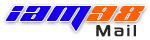
<style>
.page{position:relative;width:150px;height:40px;background:#ffffff}
.page>*{position:absolute;margin:0}
.t1{font:27.9px "PlanetKosmos";letter-spacing:0.075em;color:#1600ee;scale:1.08 1}
.t2{font:27.9px "PlanetKosmos";letter-spacing:0.075em;color:#ff5f07;scale:1.08 1}
.t3{font:22.7px "SonySketchEF";letter-spacing:0.1em;color:#272728;font-weight:bold;scale:0.88 1}
</style>
<div class="page">
<p class="t1" style="left:5px;top:6px;width:86px;height:25px">iam</p>
<p class="t2" style="left:86px;top:6px;width:59px;height:15px">98</p>
<p class="t3" style="left:96px;top:25px;width:40px;height:12px">Mail</p>
</div>
